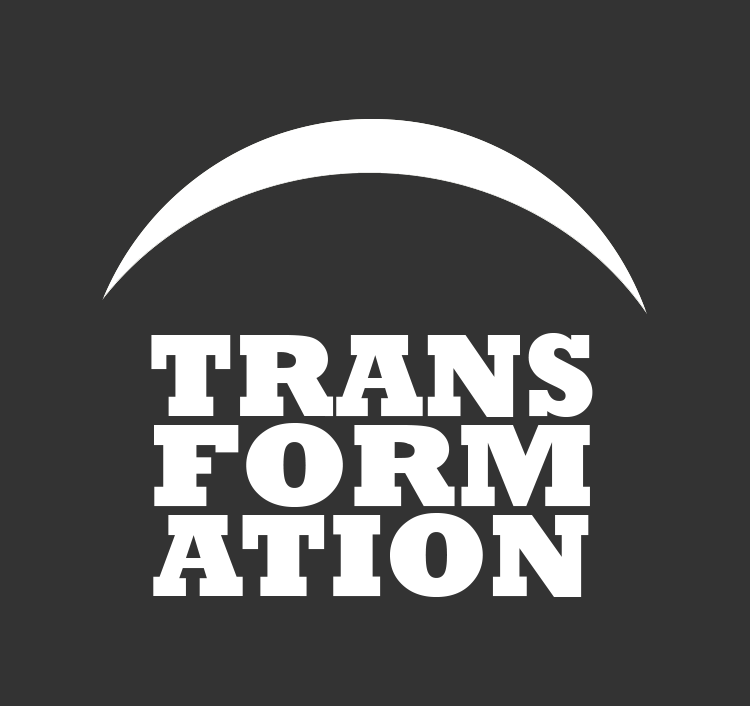
<style>
.page{position:relative;width:750px;height:706px;background:#333333}
.page>*{position:absolute;margin:0}
.t1{font:120px "Rockwell-ExtraBold";color:#ffffff}
.t2{font:120px "Rockwell-ExtraBold";color:#ffffff;scale:1.05 1}
</style>
<div class="page">
<p class="t1" style="left:151px;top:333px;width:442px;height:84px">TRANS</p>
<p class="t2" style="left:154px;top:423px;width:436px;height:84px">FORM</p>
<p class="t1" style="left:153px;top:513px;width:436px;height:84px">ATION</p>
</div>
